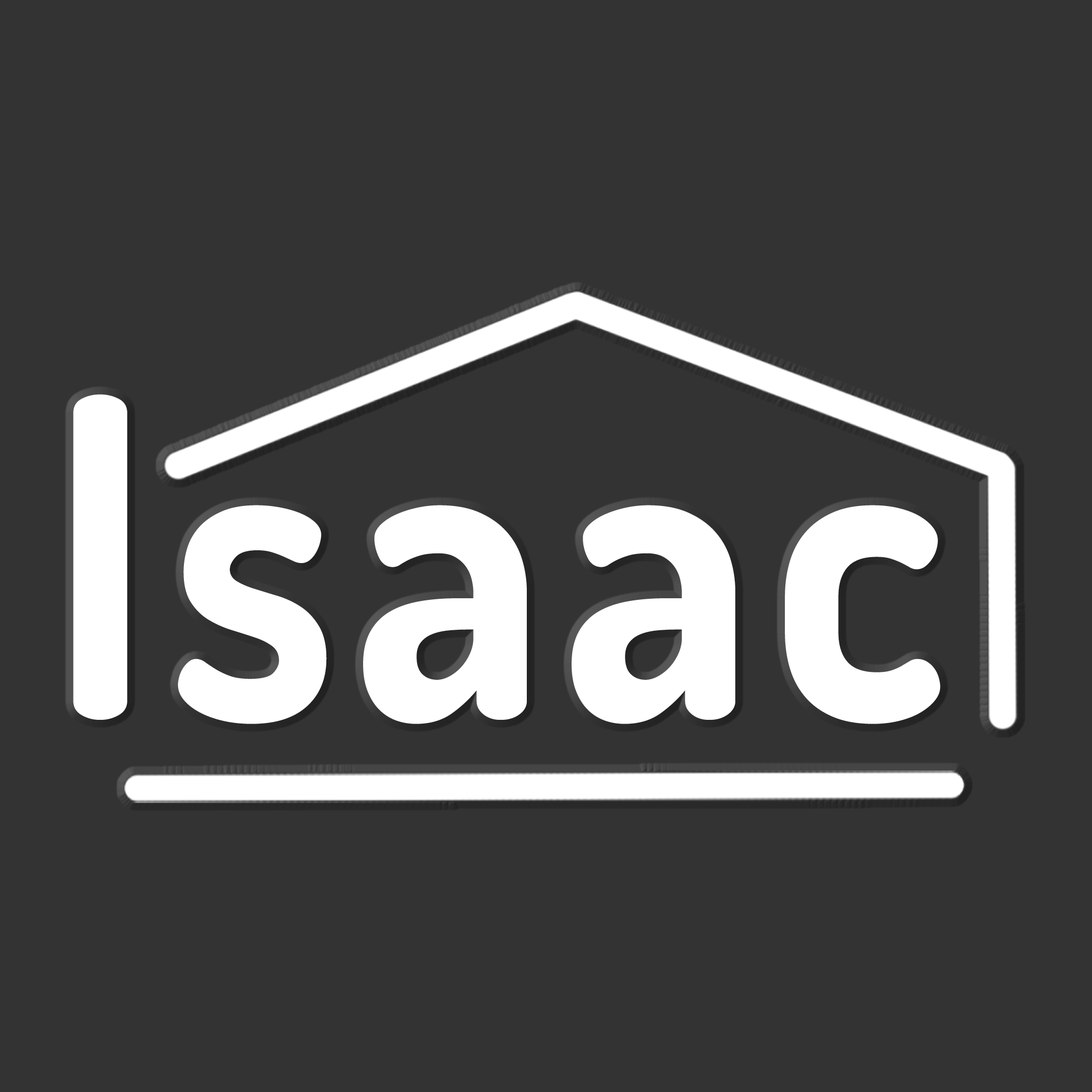
<style>
.page{position:relative;width:1092px;height:1092px;background:#333333}
.page>*{position:absolute;margin:0}
.t1{font:443.1px "Dosis-Bold";letter-spacing:0.02em;color:#ffffff;font-weight:bold;scale:0.91 1}
</style>
<div class="page">
<p class="t1" style="left:73px;top:394px;width:868px;height:330px">Isaac</p>
</div>
